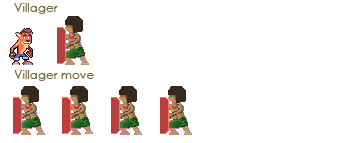
<style>
.page{position:relative;width:360px;height:143px;background:#ffffff}
.page>*{position:absolute;margin:0}
.t1{font:12px "CenturyGothic";color:#766b3e}
</style>
<div class="page">
<p class="t1" style="left:14px;top:3px;width:44px;height:11px">Villager</p>
<p class="t1" style="left:14px;top:70px;width:80px;height:11px">Villager move</p>
</div>
